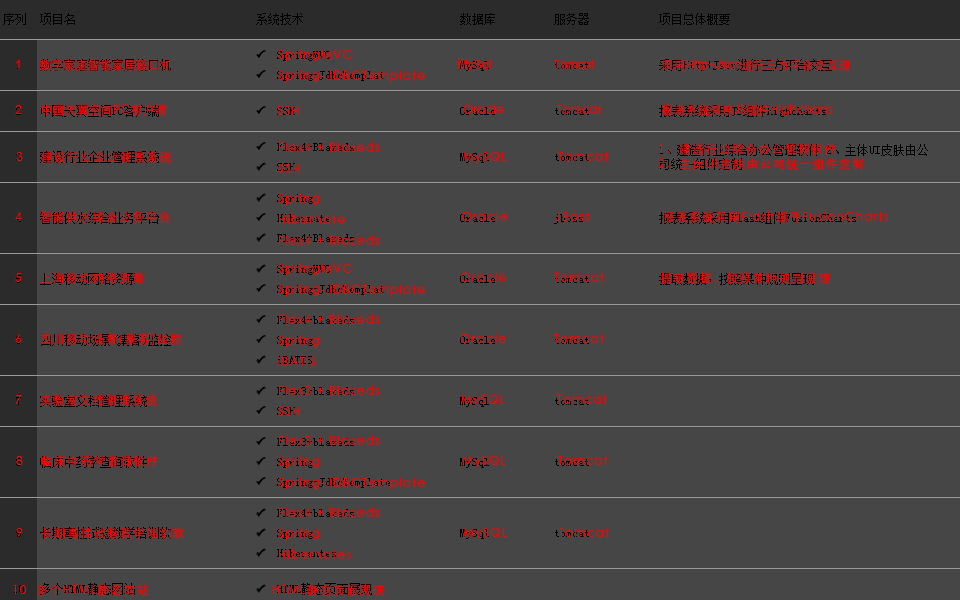
<style>
.page{position:relative;width:960px;height:600px;background:#464646}
.page>*{position:absolute;margin:0}
.t1{font:12px "STXihei";letter-spacing:0.1em;color:#ff0000}
.t2{font:12px "ArialMT";letter-spacing:0.01em;color:#ff0000}
.t3{font:12px "STXihei";letter-spacing:0.01em;color:#ff0000}
.t4{font:12px/15px "STXihei";letter-spacing:0.1em;color:#ff0000}
.t5{font:12px/15px "ArialMT";letter-spacing:0.1em;color:#ff0000}
</style>
<div class="page">
<p class="t1" style="left:278px;top:50px;width:147px;height:33px;text-align:justify">SpringMVC<br>Spring-JDBCTemplate</p>
<p class="t2" style="left:16px;top:59px;width:834px;height:13px">1     <span class="t3">数字家庭智能家居接口机</span>                                                                             MySql           Tomcat           <span class="t3">采用</span>Http+Json<span class="t3">进行三方平台交互现</span></p>
<p class="t3" style="left:15px;top:104px;width:818px;height:13px">2      中国天翼空间PC客户端                                                                                               Oracle                 Tomcat                   报表系统采用JS组件Highcharts</p>
<p class="t1" style="left:277px;top:106px;width:22px;height:9px">SSH</p>
<p class="t1" style="left:278px;top:142px;width:102px;height:31px;text-align:justify">Flex4 + Blazeds<br>SSH</p>
<p class="t4" style="left:658px;top:143px;width:205px;height:27px;text-align:justify">1、建造行业综合办公管理软件<br>2、主体<span class="t5">UI</span>皮肤由公司统一组件定制</p>
<p class="t1" style="left:16px;top:151px;width:593px;height:13px">3    建设行业企业管理系统                                                                     MySQL            Tomcat</p>
<p class="t1" style="left:278px;top:194px;width:102px;height:52px;text-align:justify">Spring<br>Hibernate<br>Flex4 + Blazeds</p>
<p class="t1" style="left:15px;top:211px;width:873px;height:13px">4    智能供水综合业务平台                                                                     Oracle           JBoss                 报表系统采用Flash组件FusionCharts</p>
<p class="t1" style="left:278px;top:264px;width:147px;height:33px;text-align:justify">SpringMVC<br>Spring-JDBCTemplate</p>
<p class="t1" style="left:15px;top:272px;width:815px;height:13px">5    上海移动网络资源                                                                           Oracle           Tomcat             提取数据，按照某种规则呈现</p>
<p class="t1" style="left:278px;top:314px;width:102px;height:53px;text-align:justify">Flex4 + Blazeds<br>Spring<br>iBATIS</p>
<p class="t1" style="left:15px;top:333px;width:589px;height:13px">6    四川移动场景(集客)监控                                                                  Oracle           Tomcat</p>
<p class="t1" style="left:278px;top:385px;width:102px;height:31px;text-align:justify">Flex3 + Blazeds<br>SSH</p>
<p class="t1" style="left:15px;top:394px;width:592px;height:13px">7    实验室文档管理系统                                                                        MySQL            Tomcat</p>
<p class="t1" style="left:278px;top:435px;width:147px;height:55px;text-align:justify">Flex3 + Blazeds<br>Spring<br>Spring-JDBCTemplate</p>
<p class="t1" style="left:16px;top:455px;width:592px;height:13px">8    临床中药学查询软件                                                                        MySQL            Tomcat</p>
<p class="t1" style="left:278px;top:507px;width:102px;height:53px;text-align:justify">Flex4 + Blazeds<br>Spring<br>Hibernates</p>
<p class="t1" style="left:16px;top:527px;width:593px;height:13px">9    长期毒性试验教学培训软                                                                  MySQL            Tomcat</p>
<p class="t1" style="left:13px;top:584px;width:372px;height:13px">10  多个HTML静态网站                             HTML静态页面展现</p>
</div>
